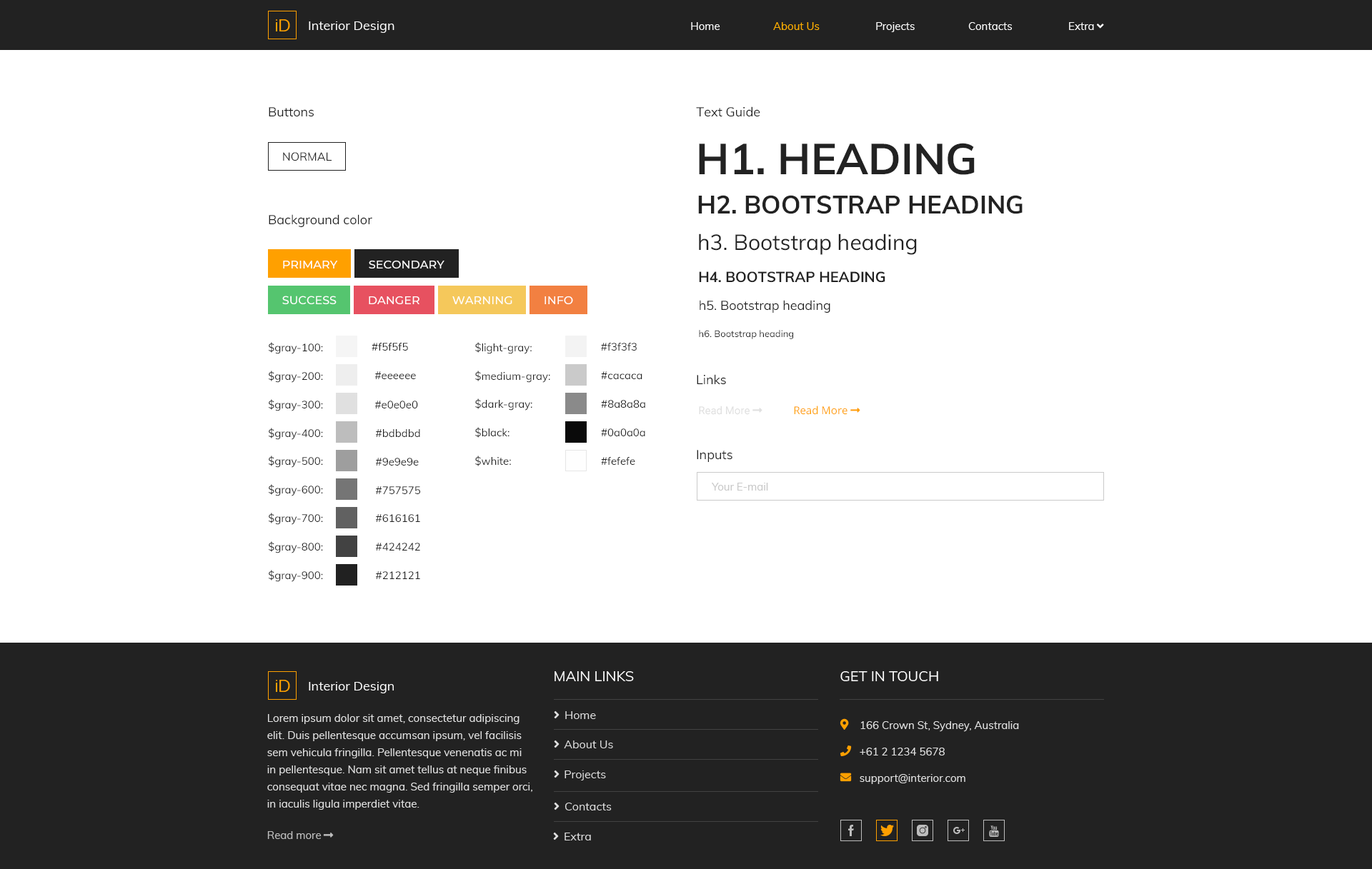
<style>
.page{position:relative;width:1372px;height:869px;background:#ffffff}
.page>*{position:absolute;margin:0}
.t1{font:12.8px "Muli-Regular";color:#222222}
.t2{font:42.8px "Muli-Bold";color:#222222;text-transform:uppercase}
.t3{font:11.4px "Muli-Regular";color:#222222;text-transform:uppercase}
.t4{font:25px "Muli-Bold";color:#222222;text-transform:uppercase}
.t5{font:21.4px "Muli-Regular";color:#222222}
.t6{font:11.4px "Montserrat-Medium";color:#ffffff;text-transform:uppercase}
.t7{font:14.3px "Muli-Bold";color:#222222;text-transform:uppercase}
.t8{font:9.3px "Muli-Regular";color:#222222}
.t9{font:10.7px/28.6px "Muli-Regular";color:#222222}
.t10{font:10.7px "Muli-Regular";color:#222222}
.t11{font:10.7px/28.5px "Muli-Regular";color:#222222}
.t12{font:10.7px "Muli-Regular";color:#cacaca}
</style>
<div class="page">
<p class="t1" style="left:269px;top:107px;width:45px;height:10px">Buttons</p>
<p class="t1" style="left:696px;top:106px;width:64px;height:11px">Text Guide</p>
<p class="t2" style="left:699px;top:143px;width:275px;height:32px">h1. heading</p>
<p class="t3" style="left:283px;top:152px;width:48px;height:9px">Normal</p>
<p class="t4" style="left:698px;top:195px;width:324px;height:19px">h2. Bootstrap heading</p>
<p class="t1" style="left:269px;top:214px;width:103px;height:13px">Background color</p>
<p class="t5" style="left:699px;top:234px;width:218px;height:21px">h3. Bootstrap heading</p>
<p class="t6" style="left:283px;top:261px;width:55px;height:8px">Primary</p>
<p class="t6" style="left:369px;top:260px;width:75px;height:9px">Secondary</p>
<p class="t7" style="left:699px;top:271px;width:186px;height:12px">h4. Bootstrap heading</p>
<p class="t6" style="left:282px;top:296px;width:54px;height:9px">Success</p>
<p class="t6" style="left:369px;top:296px;width:50px;height:9px">Danger</p>
<p class="t6" style="left:452px;top:296px;width:60px;height:9px">Warning</p>
<p class="t6" style="left:544px;top:296px;width:29px;height:9px">Info</p>
<p class="t1" style="left:699px;top:300px;width:131px;height:13px">h5. Bootstrap heading</p>
<p class="t8" style="left:699px;top:330px;width:94px;height:9px">h6. Bootstrap heading</p>
<p class="t9" style="left:269px;top:342px;width:54px;height:240px;text-align:right">$gray-100: <br>$gray-200: <br>$gray-300: <br>$gray-400: <br>$gray-500: <br>$gray-600:<br>$gray-700:<br>$gray-800:<br>$gray-900:</p>
<p class="t10" style="left:371px;top:343px;width:37px;height:8px">#f5f5f5</p>
<p class="t11" style="left:475px;top:342px;width:75px;height:124px;text-align:right">$light-gray:<br>$medium-gray:<br>$dark-gray:<br>$black:<br>$white:</p>
<p class="t10" style="left:601px;top:343px;width:36px;height:8px">#f3f3f3</p>
<p class="t10" style="left:375px;top:371px;width:41px;height:8px">#eeeeee</p>
<p class="t10" style="left:601px;top:371px;width:41px;height:8px">#cacaca</p>
<p class="t1" style="left:697px;top:374px;width:29px;height:11px">Links</p>
<p class="t10" style="left:375px;top:401px;width:43px;height:8px">#e0e0e0</p>
<p class="t10" style="left:601px;top:400px;width:44px;height:8px">#8a8a8a</p>
<p class="t10" style="left:376px;top:429px;width:44px;height:8px">#bdbdbd</p>
<p class="t10" style="left:601px;top:429px;width:44px;height:7px">#0a0a0a</p>
<p class="t10" style="left:376px;top:458px;width:43px;height:8px">#9e9e9e</p>
<p class="t10" style="left:601px;top:457px;width:34px;height:8px">#fefefe</p>
<p class="t1" style="left:697px;top:450px;width:35px;height:12px">Inputs</p>
<p class="t12" style="left:711px;top:483px;width:57px;height:8px">Your E-mail</p>
<p class="t10" style="left:376px;top:486px;width:44px;height:8px">#757575</p>
<p class="t10" style="left:376px;top:514px;width:44px;height:8px">#616161</p>
<p class="t10" style="left:376px;top:543px;width:44px;height:8px">#424242</p>
<p class="t10" style="left:376px;top:571px;width:44px;height:8px">#212121</p>
</div>
